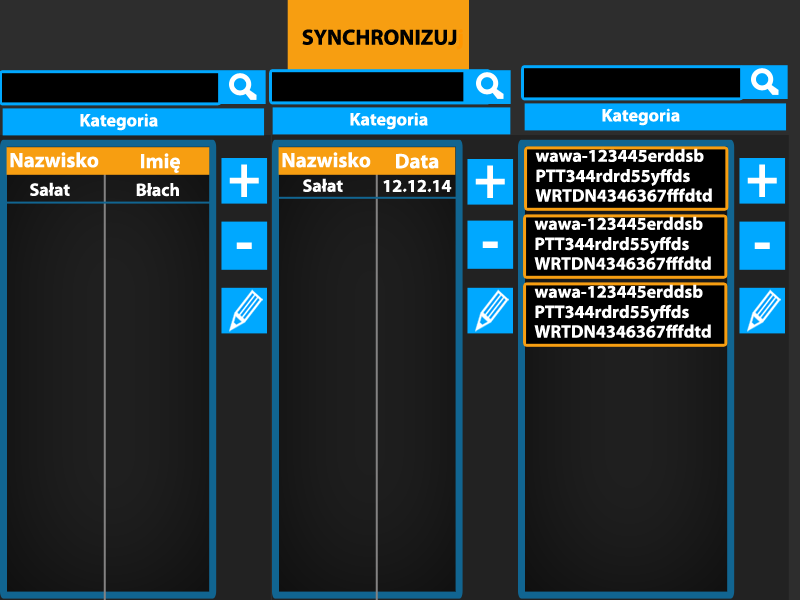
<style>
.page{position:relative;width:800px;height:600px}
.page>*{position:absolute;margin:0}
.t1{font:22px "MyriadPro-Bold";color:#000000}
.t2{font:22px "MyriadPro-Bold";color:#ff9600}
.t3{font:18px "MyriadPro-Bold";color:#ffffff}
.t4{font:21px "MyriadPro-Bold";color:#ffffff}
.t5{font:60.5px "MyriadPro-Bold";color:#ffffff;scale:0.92 1}
.t6{font:63.8px "MyriadPro-Bold";color:#ffffff;scale:0.88 1}
</style>
<div class="page">
<p class="t1" style="left:302px;top:29px;width:161px;height:21px">SYNCHRONIZUJ<span class="t2">j</span></p>
<p class="t3" style="left:80px;top:113px;width:78px;height:18px">Kategoria</p>
<p class="t3" style="left:350px;top:112px;width:78px;height:18px">Kategoria</p>
<p class="t3" style="left:602px;top:108px;width:78px;height:18px">Kategoria</p>
<p class="t3" style="left:535px;top:148px;width:169px;height:14px">wawa-123445erddsb</p>
<p class="t4" style="left:10px;top:152px;width:89px;height:16px">Nazwisko</p>
<p class="t4" style="left:141px;top:153px;width:39px;height:20px">Imię</p>
<p class="t4" style="left:282px;top:152px;width:89px;height:16px">Nazwisko</p>
<p class="t4" style="left:396px;top:153px;width:43px;height:16px">Data</p>
<p class="t5" style="left:229px;top:164px;width:30px;height:33px">+</p>
<p class="t5" style="left:475px;top:165px;width:30px;height:33px">+</p>
<p class="t3" style="left:536px;top:168px;width:154px;height:18px">PTT344rdrd55yffds</p>
<p class="t5" style="left:747px;top:164px;width:30px;height:33px">+</p>
<p class="t3" style="left:30px;top:182px;width:40px;height:14px">Sałat</p>
<p class="t3" style="left:136px;top:183px;width:43px;height:14px">Błach</p>
<p class="t3" style="left:303px;top:178px;width:40px;height:14px">Sałat</p>
<p class="t3" style="left:383px;top:179px;width:69px;height:14px">12.12.14</p>
<p class="t3" style="left:535px;top:188px;width:177px;height:14px">WRTDN4346367fffdtd</p>
<p class="t3" style="left:534px;top:216px;width:169px;height:14px">wawa-123445erddsb</p>
<p class="t6" style="left:236px;top:242px;width:16px;height:7px">-</p>
<p class="t6" style="left:482px;top:241px;width:16px;height:7px">-</p>
<p class="t3" style="left:535px;top:236px;width:154px;height:18px">PTT344rdrd55yffds</p>
<p class="t6" style="left:754px;top:242px;width:16px;height:7px">-</p>
<p class="t3" style="left:534px;top:256px;width:177px;height:14px">WRTDN4346367fffdtd</p>
<p class="t3" style="left:534px;top:284px;width:169px;height:14px">wawa-123445erddsb</p>
<p class="t3" style="left:535px;top:304px;width:154px;height:18px">PTT344rdrd55yffds</p>
<p class="t3" style="left:534px;top:324px;width:177px;height:14px">WRTDN4346367fffdtd</p>
</div>
